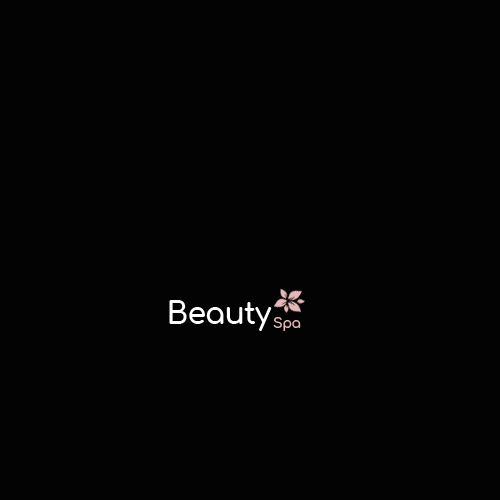
<style>
.page{position:relative;width:500px;height:500px;background:#030303}
.page>*{position:absolute;margin:0}
.t1{font:30px "Comfortaa-Bold";letter-spacing:-0.03em;color:#fefefe}
.t2{font:14px "Comfortaa-Bold";letter-spacing:-0.03em;color:#e8b8b8}
</style>
<div class="page">
<p class="t1" style="left:169px;top:300px;width:103px;height:31px">Beauty</p>
<p class="t2" style="left:273px;top:317px;width:28px;height:14px">Spa</p>
</div>
